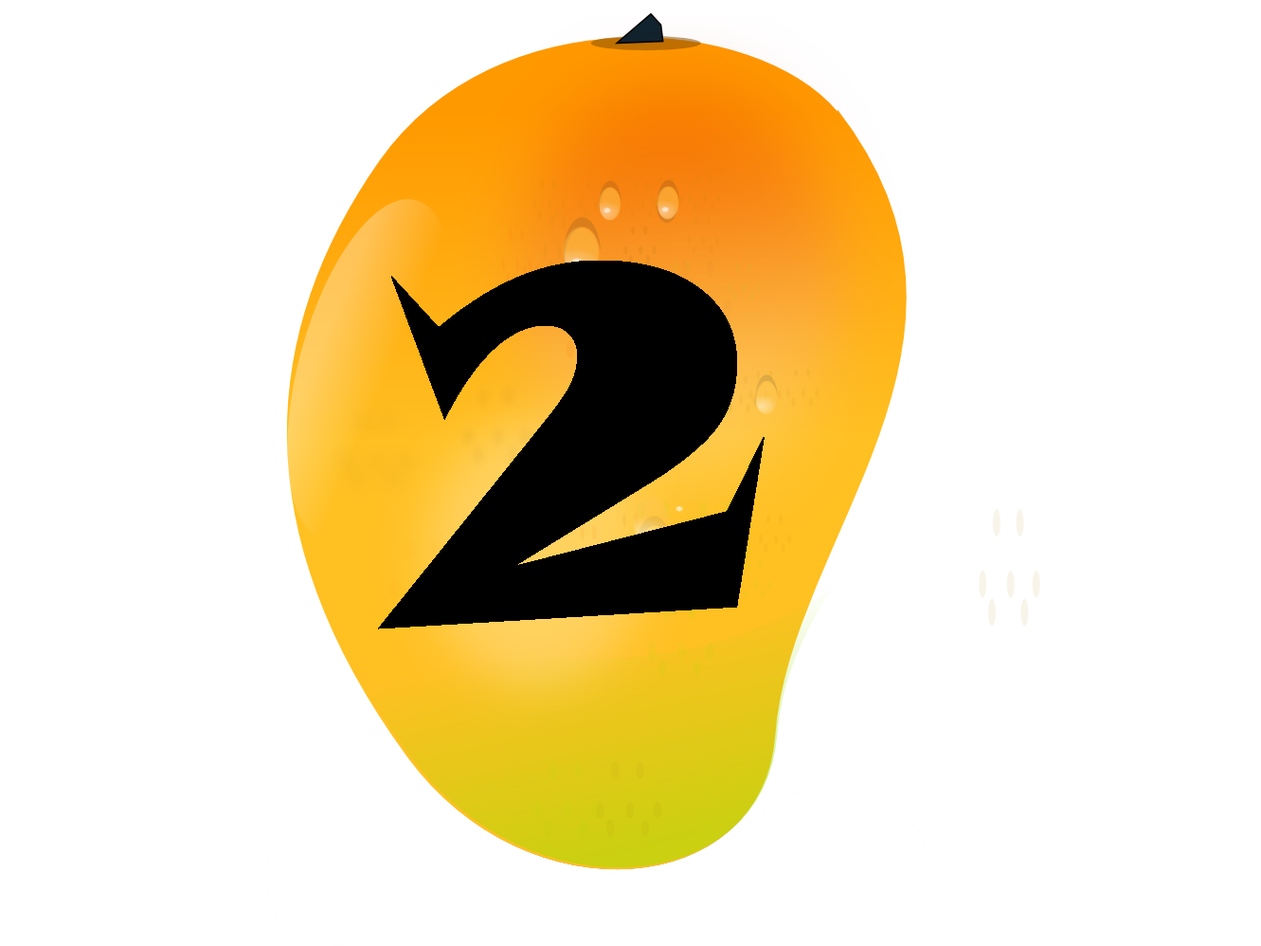
<style>
.page{position:relative;width:1261px;height:946px;background:#ffffff}
.page>*{position:absolute;margin:0}
.t1{font:492.6px "SnapITC-Regular";color:#000000}
</style>
<div class="page">
<p class="t1" style="left:378px;top:261px;width:387px;height:368px">2</p>
</div>
